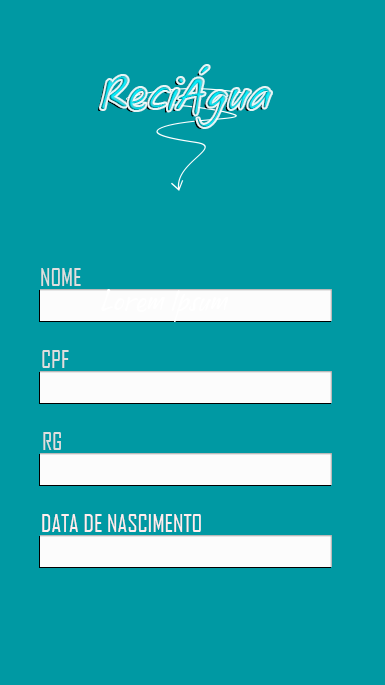
<style>
.page{position:relative;width:385px;height:685px;background:#0099a3}
.page>*{position:absolute;margin:0}
.t1{font:24px "AgencyFB-Reg";color:#dfdfdf}
.t2{font:24px "AgencyFB-Reg";color:#ffeeee}
</style>
<div class="page">
<p class="t1" style="left:41px;top:268px;width:40px;height:18px">NOME</p>
<p class="t1" style="left:42px;top:350px;width:27px;height:18px">CPF</p>
<p class="t1" style="left:43px;top:432px;width:18px;height:18px">RG</p>
<p class="t2" style="left:42px;top:514px;width:159px;height:18px">DATA DE NASCIMENTO</p>
</div>
